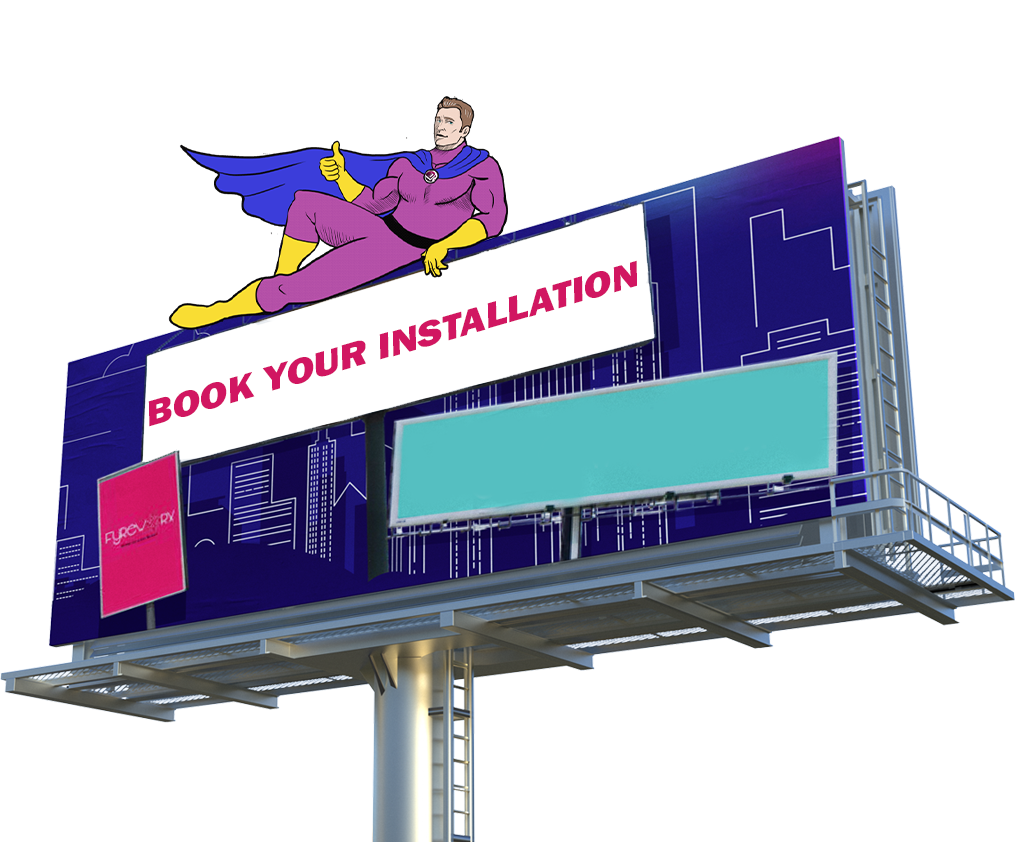
<style>
.page{position:relative;width:1015px;height:842px;background:#ffffff}
.page>*{position:absolute;margin:0}
.t1{font:37.5px "FranklinGothic-Heavy";color:#d11661;scale:1.11 1}
</style>
<div class="page">
<p class="t1" style="left:148px;top:260px;width:489px;height:167px;rotate:-16deg">BOOK YOUR INSTALLATION</p>
</div>
